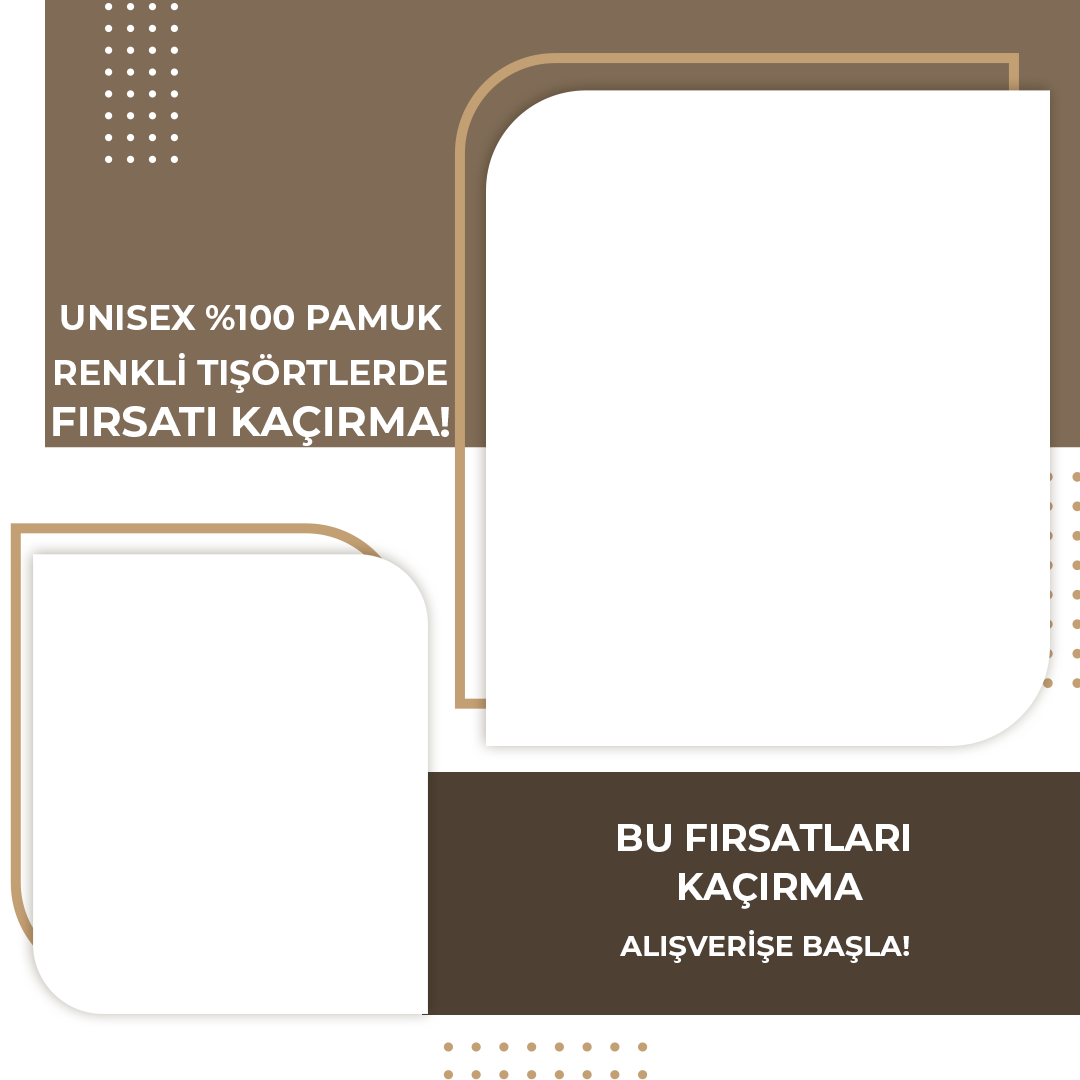
<style>
.page{position:relative;width:1080px;height:1080px;background:#ffffff}
.page>*{position:absolute;margin:0}
.t1{font:34.6px/54.2px "Montserrat-Bold";color:#ffffff;text-transform:uppercase}
.t2{font:41.9px/51.5px "Montserrat-Bold";color:#ffffff;text-transform:uppercase}
.t3{font:37.3px/49px "Montserrat-Bold";color:#ffffff;text-transform:uppercase}
.t4{font:28.3px "Montserrat-Bold";color:#fffefe;text-transform:uppercase}
</style>
<div class="page">
<p class="t1" style="left:53px;top:305px;width:396px;height:141px;text-align:center">UNISEX %100 PAMUK<br>renklİ tişörtlerde<br><span class="t2">FIRSATI KAÇIRMA!</span></p>
<p class="t3" style="left:618px;top:824px;width:291px;height:85px;text-align:center">BU FIRSATLARI <br>KAÇIRMA</p>
<p class="t4" style="left:620px;top:930px;width:289px;height:33px">ALIŞVERİŞE BAŞLA!</p>
</div>
